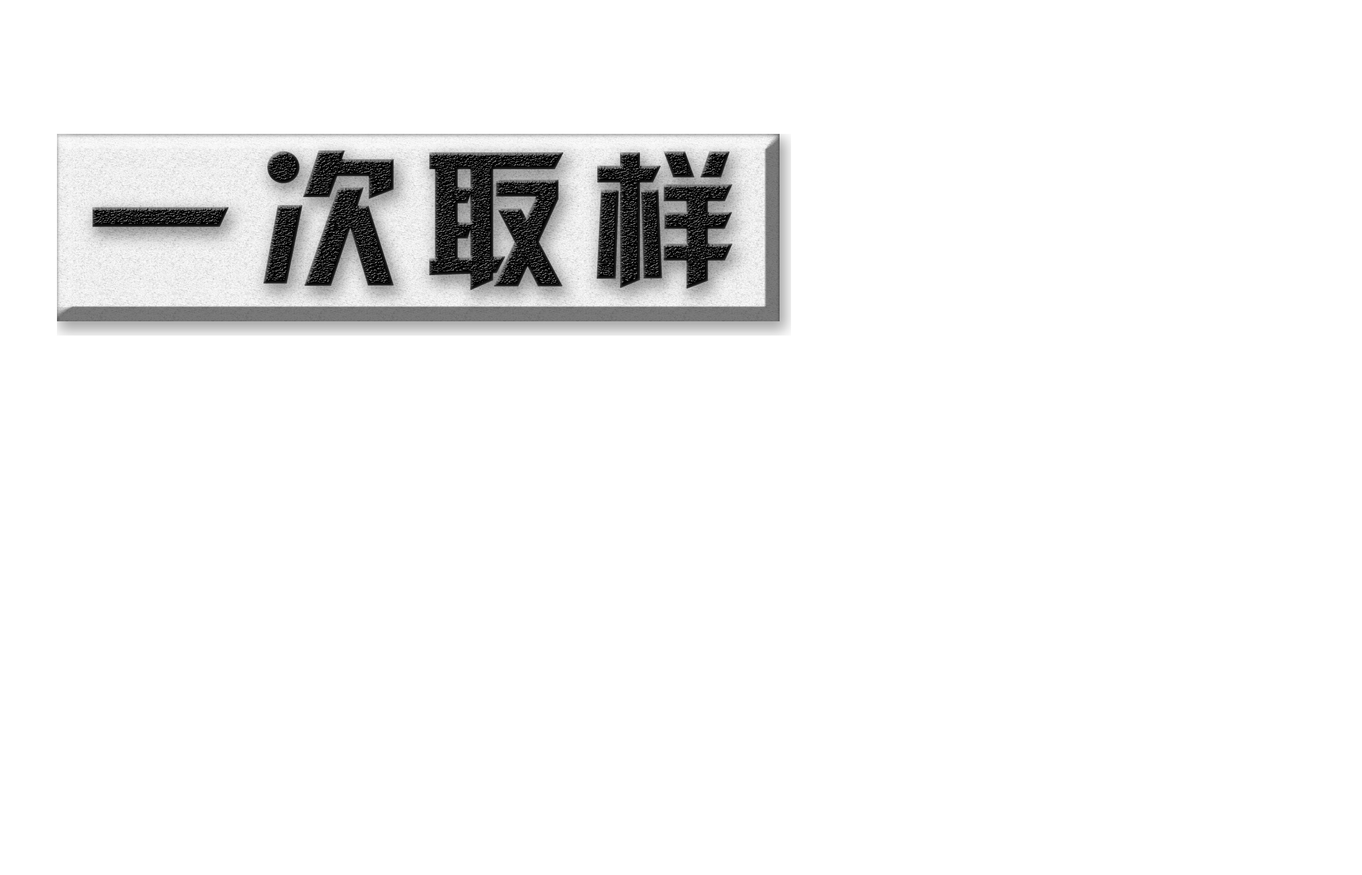
<style>
.page{position:relative;width:1362px;height:875px;background:#ffffff}
.page>*{position:absolute;margin:0}
.t1{font:149.1px "JLinXin";letter-spacing:0.1em;font-weight:bold}
</style>
<div class="page">
<p class="t1" style="left:92px;top:150px;width:640px;height:140px">一次取样</p>
</div>
